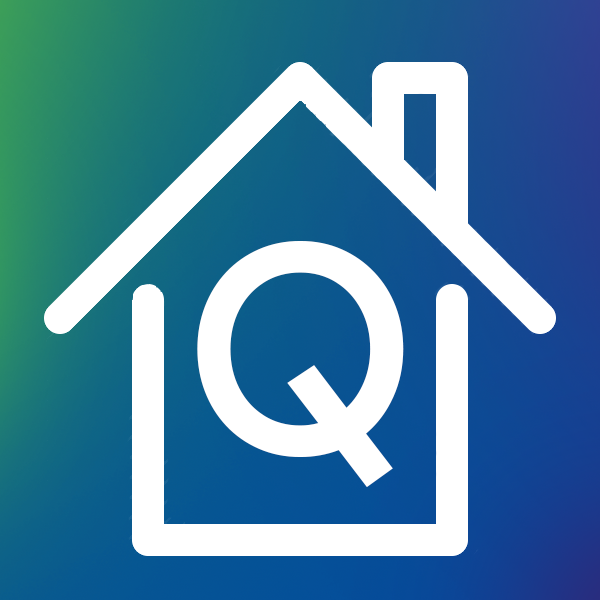
<style>
.page{position:relative;width:600px;height:600px}
.page>*{position:absolute;margin:0}
.t1{font:300px "LexendDeca-Regular";color:#ffffff}
</style>
<div class="page">
<p class="t1" style="left:197px;top:241px;width:207px;height:246px">Q</p>
</div>
